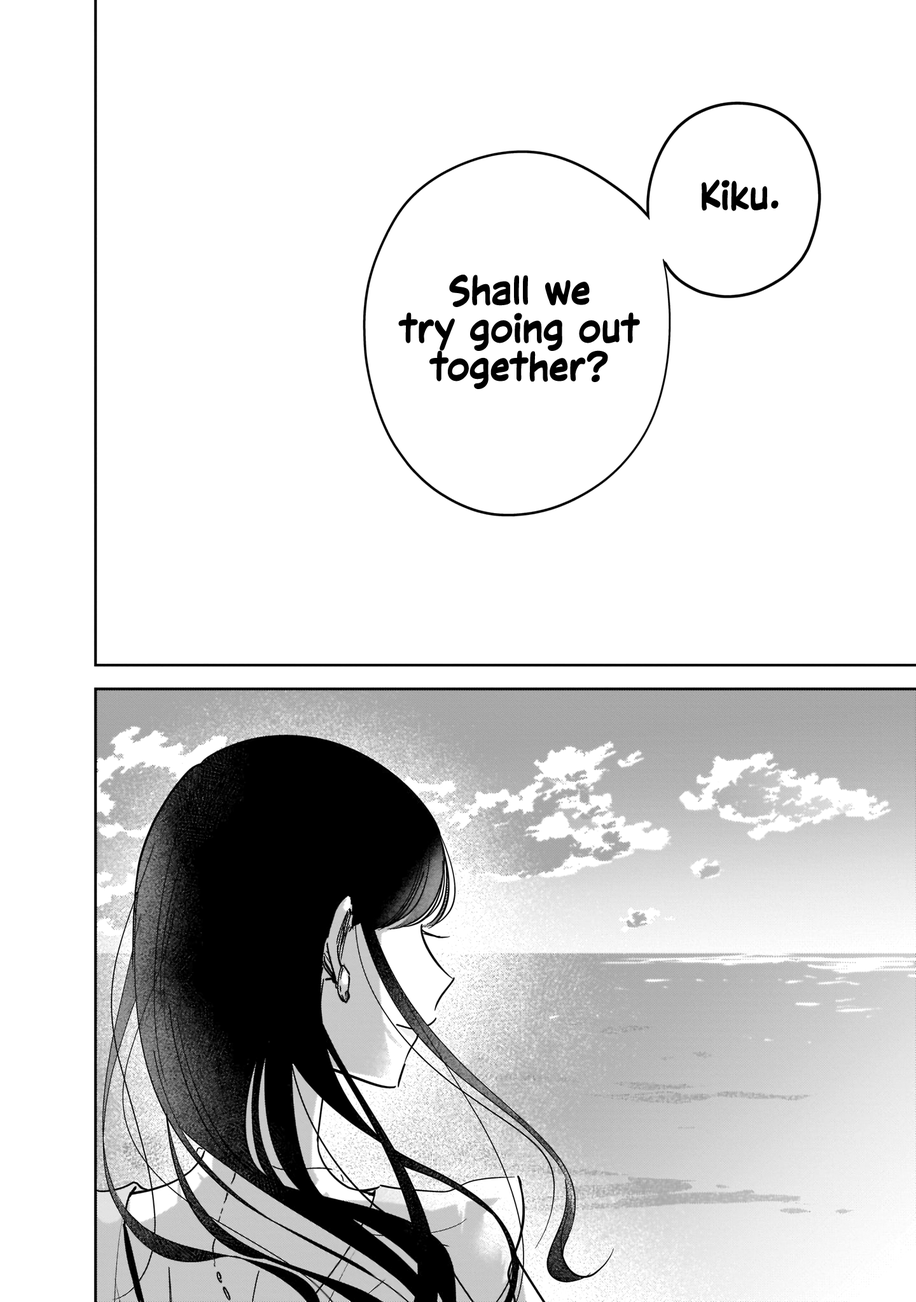
<style>
.page{position:relative;width:916px;height:1302px;background:#ffffff}
.page>*{position:absolute;margin:0}
.t1{font:38.2px "CCVictorySpeechLower-Regular";color:#000000;font-weight:bold}
</style>
<div class="page">
<p class="t1" style="left:701px;top:179px;width:77px;height:32px">Kiku.</p>
<p class="t1" style="left:398px;top:275px;width:242px;height:114px;text-align:center">Shall we<br>try going out<br>together?</p>
</div>
